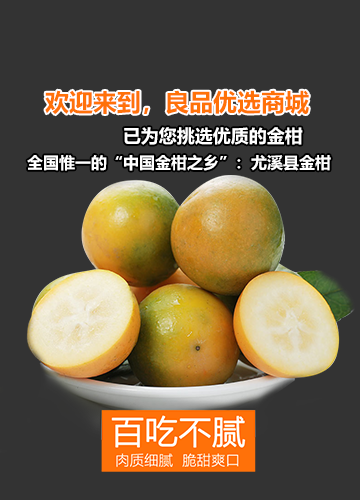
<style>
.page{position:relative;width:360px;height:500px;background:#333333}
.page>*{position:absolute;margin:0}
.t1{font:24px "MicrosoftYaHei-Bold";color:#ff7109}
.t2{font:18px "MicrosoftYaHei-Bold";color:#ffffff;text-transform:uppercase}
.t3{font:16px "MicrosoftYaHei-Bold";color:#ffffff}
</style>
<div class="page">
<p class="t1" style="left:45px;top:90px;width:264px;height:25px">欢迎来到，良品优选商城</p>
<p class="t2" style="left:124px;top:127px;width:179px;height:18px">已为您挑选优质的金柑</p>
<p class="t3" style="left:27px;top:154px;width:304px;height:17px">全国惟一的“中国金柑之乡”：尤溪县金柑</p>
</div>
